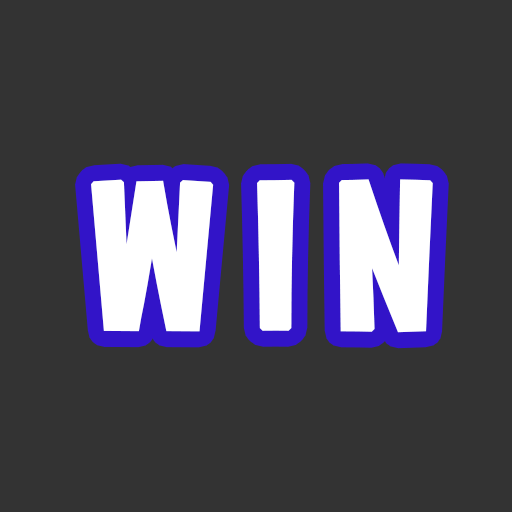
<style>
.page{position:relative;width:512px;height:512px;background:#333333}
.page>*{position:absolute;margin:0}
.t1{font:200px "Splat2K";letter-spacing:0.155em;color:#ffffff;font-weight:bold}
</style>
<div class="page">
<p class="t1" style="left:91px;top:179px;width:342px;height:154px">WIN</p>
</div>
